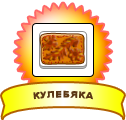
<style>
.page{position:relative;width:126px;height:120px;background:#ffffff}
.page>*{position:absolute;margin:0}
.t1{font:9px "Arial-Black";letter-spacing:0.075em;color:#5b3714;text-transform:uppercase}
</style>
<div class="page">
<p class="t1" style="left:33px;top:90px;width:60px;height:10px">Кулебяка</p>
</div>
